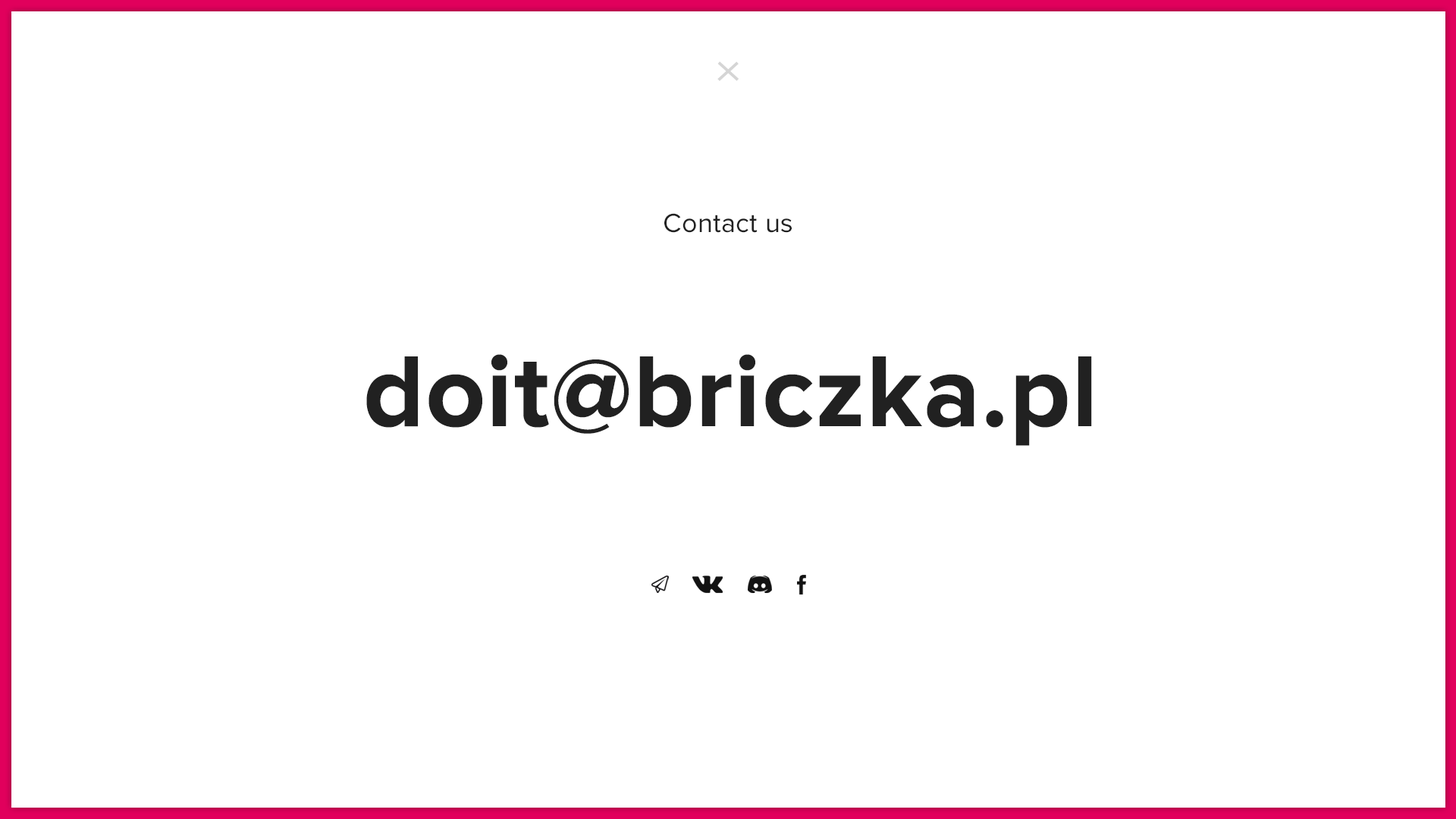
<style>
.page{position:relative;width:1456px;height:819px;background:#ffffff}
.page>*{position:absolute;margin:0}
.t1{font:27.3px "ProximaNova-Regular";letter-spacing:0.01em;color:#212121}
.t2{font:104.6px "ProximaNova-Bold";letter-spacing:0.01em;color:#212121}
</style>
<div class="page">
<p class="t1" style="left:664px;top:213px;width:128px;height:20px">Contact us</p>
<p class="t2" style="left:366px;top:354px;width:726px;height:92px">doit@briczka.pl</p>
</div>
